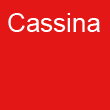
<style>
.page{position:relative;width:110px;height:110px;background:#e41717}
.page>*{position:absolute;margin:0}
.t1{font:26px "ArialMT";color:#ffffff}
</style>
<div class="page">
<p class="t1" style="left:8px;top:13px;width:92px;height:19px">Cassina</p>
</div>
